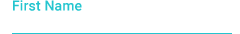
<style>
.page{position:relative;width:240px;height:34px;background:#ffffff}
.page>*{position:absolute;margin:0}
.t1{font:14px "Roboto-Medium";letter-spacing:0.01em;color:#24c5cf}
</style>
<div class="page">
<p class="t1" style="left:13px;top:0px;width:69px;height:11px">First Name</p>
</div>
